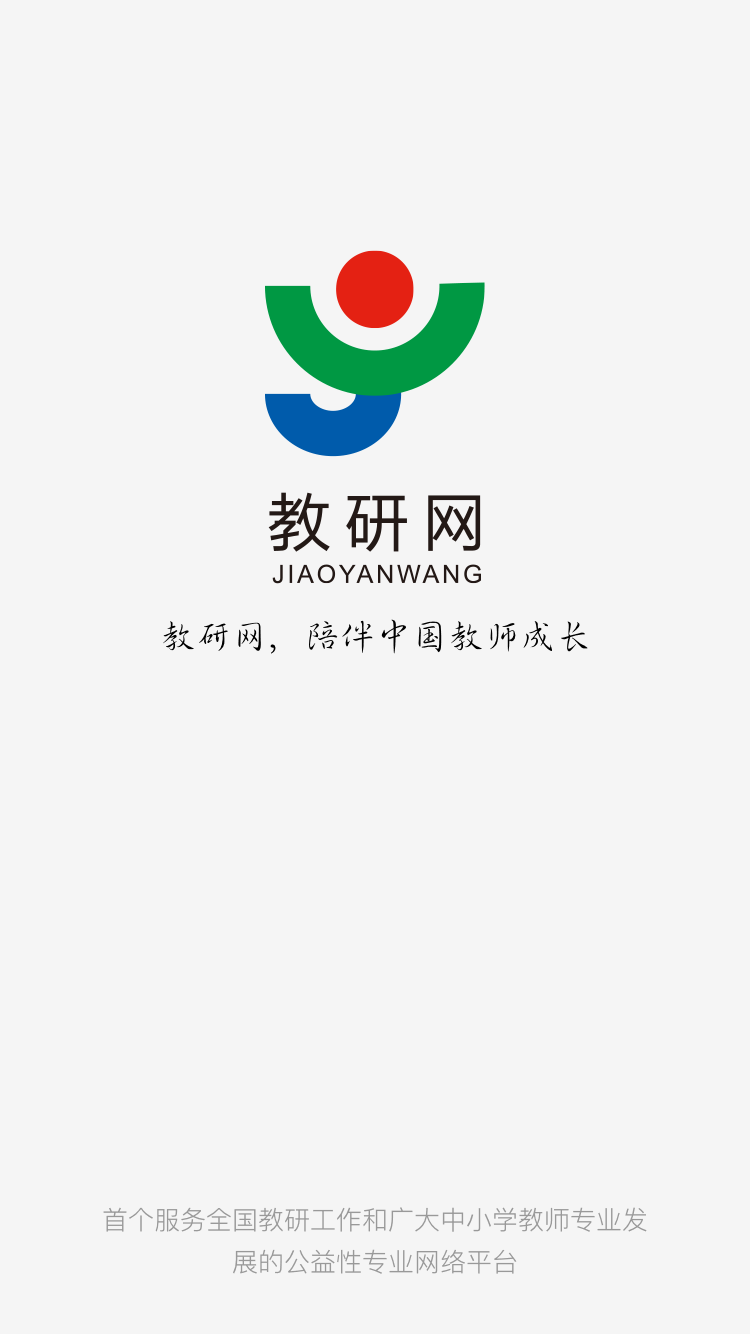
<style>
.page{position:relative;width:750px;height:1334px;background:#f5f5f5}
.page>*{position:absolute;margin:0}
.t1{font:36px "¾­µäÐÐÊé¼ò Regular";color:#000000}
.t2{font:26px/42px "PingFangSC-Light";color:#999999}
</style>
<div class="page">
<p class="t1" style="left:163px;top:619px;width:425px;height:35px">教研网，陪伴中国教师成长</p>
<p class="t2" style="left:103px;top:1207px;width:544px;height:67px;text-align:center">首个服务全国教研工作和广大中小学教师专业发<br>展的公益性专业网络平台</p>
</div>
